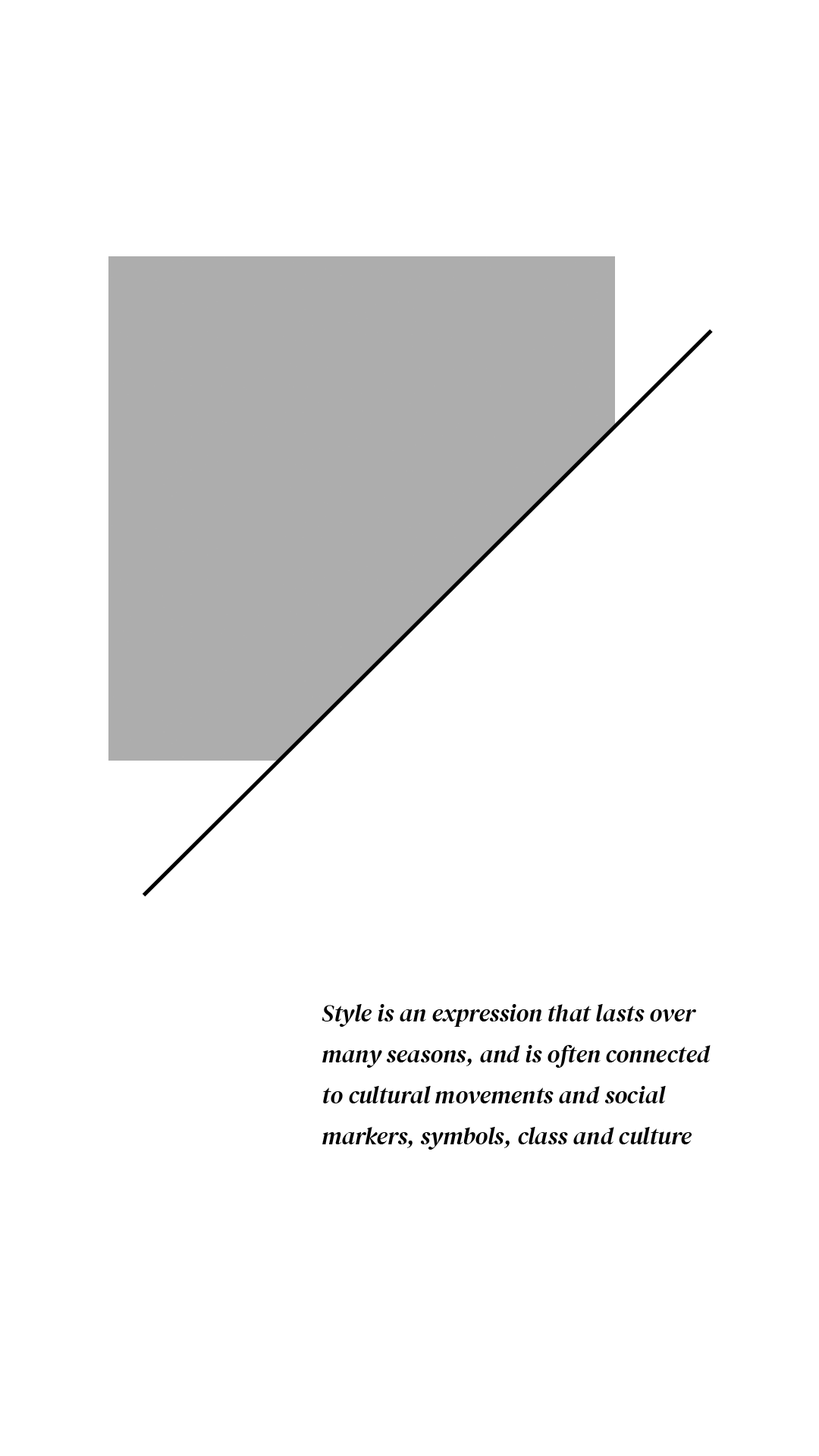
<style>
.page{position:relative;width:819px;height:1456px;background:#ffffff}
.page>*{position:absolute;margin:0}
.t1{font:24.3px/40.9px "DMSerifDisplay-Italic";color:#000000}
</style>
<div class="page">
<p class="t1" style="left:322px;top:1004px;width:389px;height:146px">Style is an expression that lasts over many seasons, and is often connected to cultural movements and social markers, symbols, class and culture</p>
</div>
